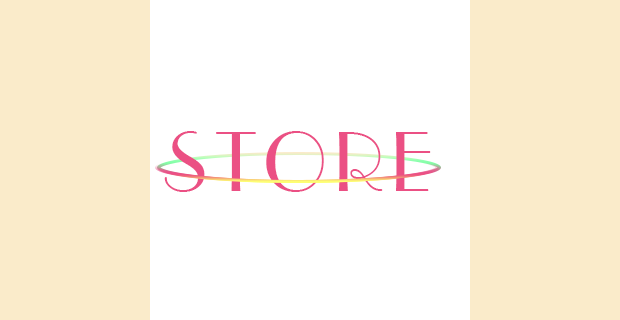
<style>
.page{position:relative;width:620px;height:320px;background:#ffffff}
.page>*{position:absolute;margin:0}
.t1{font:80px "VPS-Hoa-Binh-Hoa";letter-spacing:0.1em;color:#eb5084}
</style>
<div class="page">
<p class="t1" style="left:164px;top:131px;width:267px;height:61px">Store</p>
</div>
